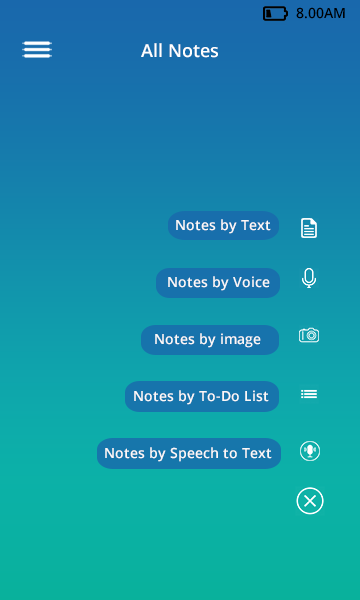
<style>
.page{position:relative;width:360px;height:600px}
.page>*{position:absolute;margin:0}
.t1{font:14px "OpenSans-Semibold";color:#000000}
.t2{font:18px "OpenSans-Semibold";color:#fbf8f8}
.t3{font:14px "OpenSans-Semibold";color:#fbf8f8}
</style>
<div class="page">
<p class="t1" style="left:296px;top:7px;width:49px;height:12px">8.00AM</p>
<p class="t2" style="left:141px;top:43px;width:77px;height:15px">All Notes</p>
<p class="t3" style="left:176px;top:219px;width:95px;height:15px">Notes by Text</p>
<p class="t3" style="left:168px;top:276px;width:102px;height:15px">Notes by Voice</p>
<p class="t3" style="left:155px;top:333px;width:106px;height:15px">Notes by image</p>
<p class="t3" style="left:134px;top:390px;width:135px;height:15px">Notes by To-Do List</p>
<p class="t3" style="left:105px;top:447px;width:167px;height:15px">Notes by Speech to Text</p>
</div>
